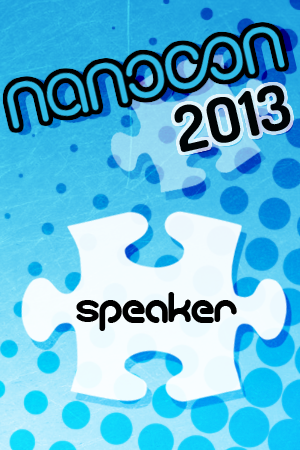
<style>
.page{position:relative;width:300px;height:450px}
.page>*{position:absolute;margin:0}
.t1{font:62.5px "Dosis-Bold";color:#000405}
.t2{font:41.7px "gitchgitch";color:#000000}
</style>
<div class="page">
<p class="t1" style="left:174px;top:85px;width:117px;height:67px;rotate:-13deg">2O13</p>
<p class="t2" style="left:76px;top:292px;width:161px;height:39px">speaker</p>
</div>
